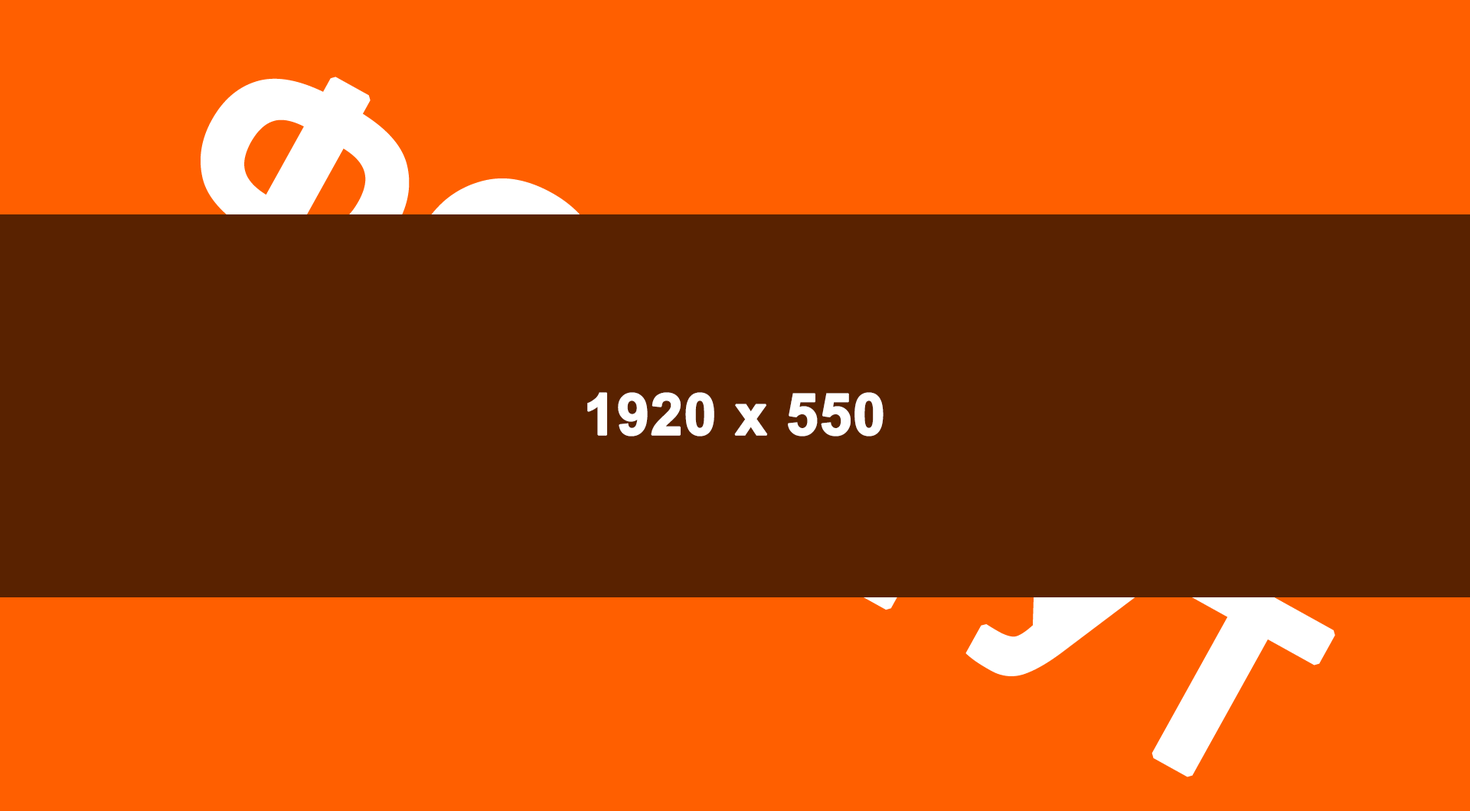
<style>
.page{position:relative;width:1470px;height:811px;background:#ff5f00}
.page>*{position:absolute;margin:0}
.t1{font:57.4px "Arial-BoldMT";color:#ffffff;font-weight:bold}
</style>
<div class="page">
<p class="t1" style="left:587px;top:392px;width:297px;height:45px">1920 x 550</p>
</div>
